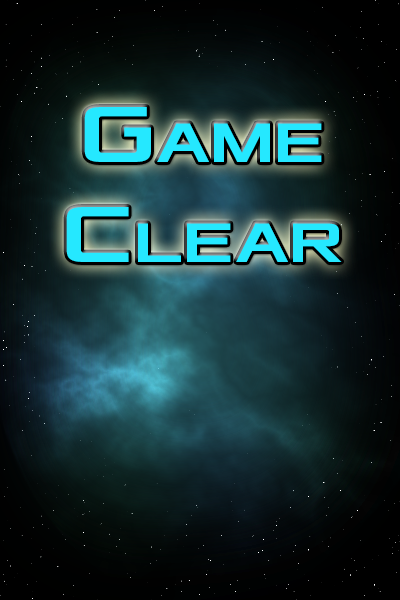
<style>
.page{position:relative;width:400px;height:600px}
.page>*{position:absolute;margin:0}
.t1{font:83.3px "Xolonium-Bold";color:#25e8ff;font-variant:small-caps}
</style>
<div class="page">
<p class="t1" style="left:66px;top:107px;width:276px;height:155px;text-align:center">Game<br>Clear</p>
</div>
